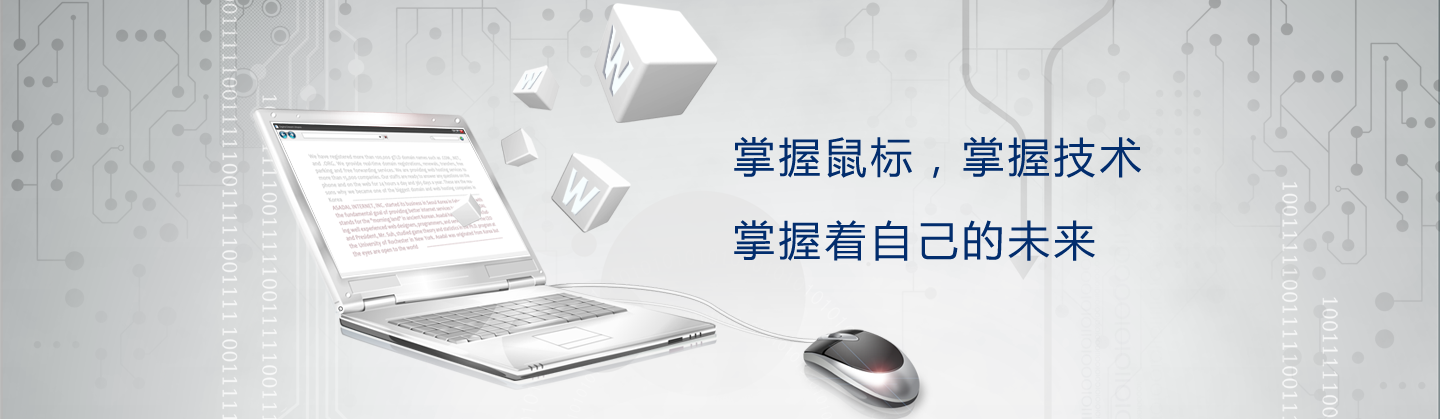
<style>
.page{position:relative;width:1440px;height:419px}
.page>*{position:absolute;margin:0}
.t1{font:41.7px/83.3px "MicrosoftYaHei";letter-spacing:0.1em;color:#022d6d}
</style>
<div class="page">
<p class="t1" style="left:734px;top:137px;width:407px;height:124px">掌握鼠标，掌握技术<br>掌握着自己的未来</p>
</div>
